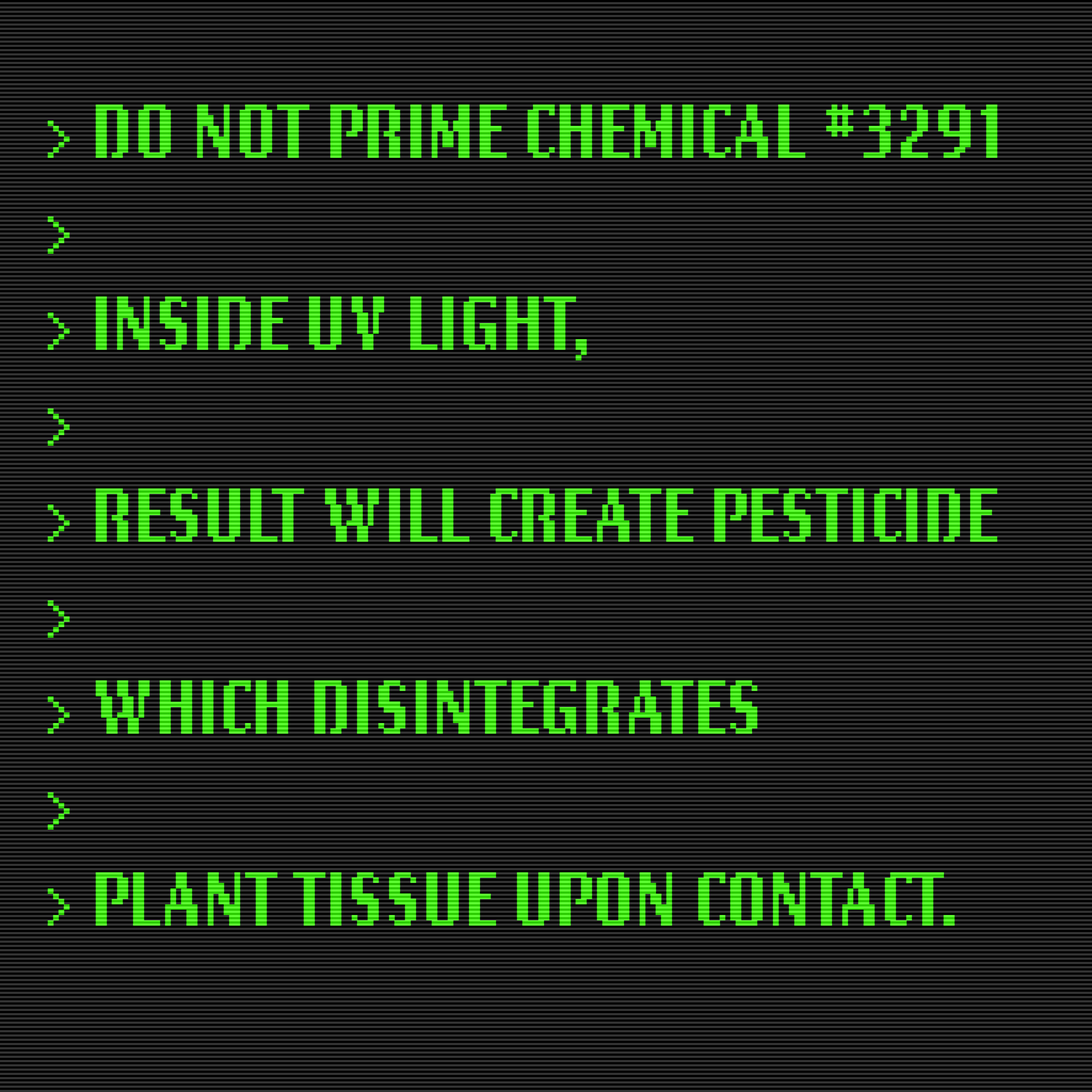
<style>
.page{position:relative;width:1092px;height:1092px}
.page>*{position:absolute;margin:0}
.t1{font:80px "LoRes15OT-BoldAltOakland"}
</style>
<div class="page">
<p class="t1" style="left:47px;top:105px;width:951px;height:821px">&gt; DO NOT PRIME CHEMICAL #3291<br>&gt; <br>&gt; INSIDE UV LIGHT, <br>&gt;<br>&gt; RESULT WILL CREATE PESTICIDE<br>&gt;<br>&gt; WHICH DISINTEGRATES <br>&gt;<br>&gt; PLANT TISSUE UPON CONTACT.</p>
</div>
